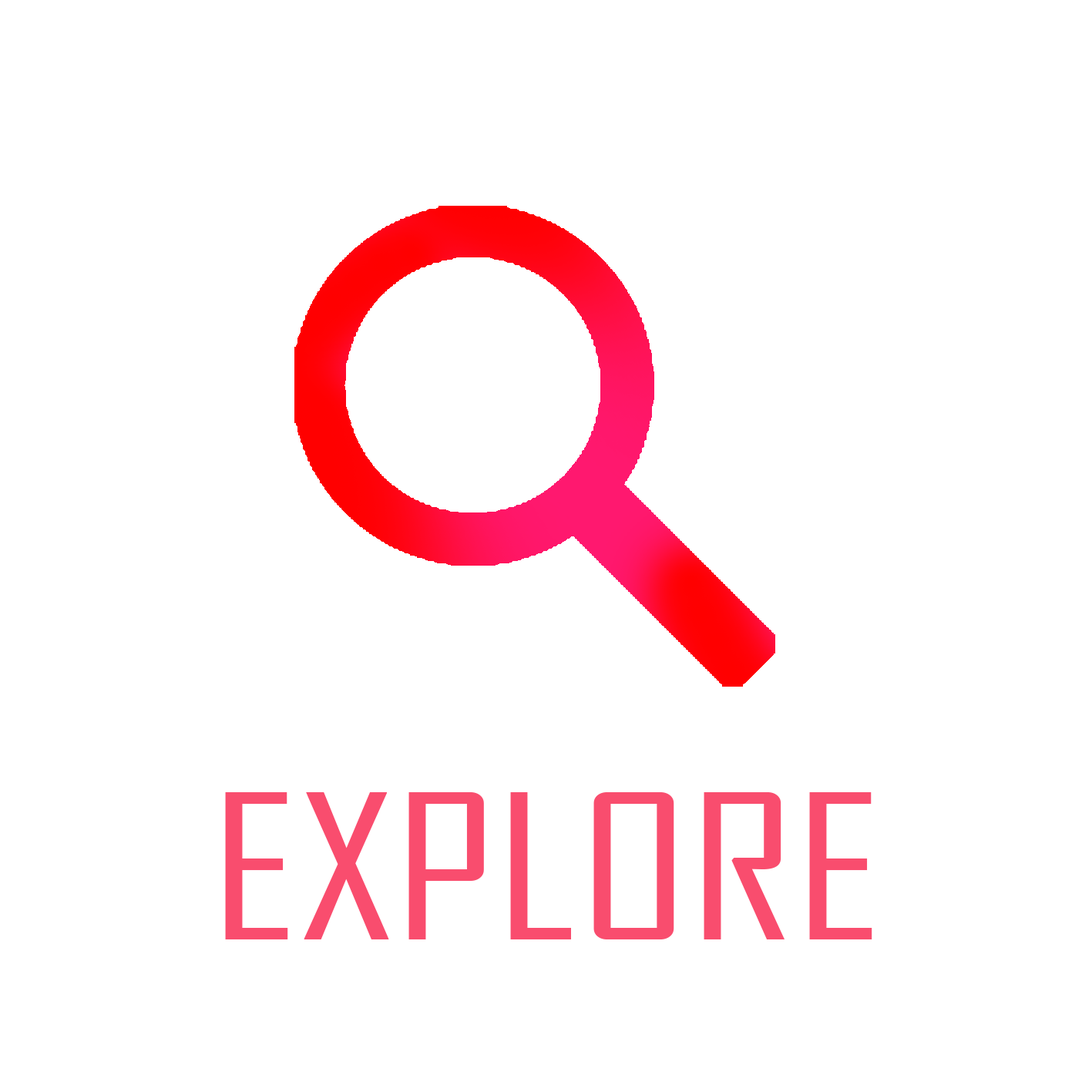
<style>
.page{position:relative;width:1092px;height:1092px;background:#ffffff}
.page>*{position:absolute;margin:0}
.t1{font:192.6px "AgencyFB-Reg";color:#f94d6e;scale:1.29 1}
</style>
<div class="page">
<p class="t1" style="left:225px;top:792px;width:647px;height:147px">EXPLORE</p>
</div>
